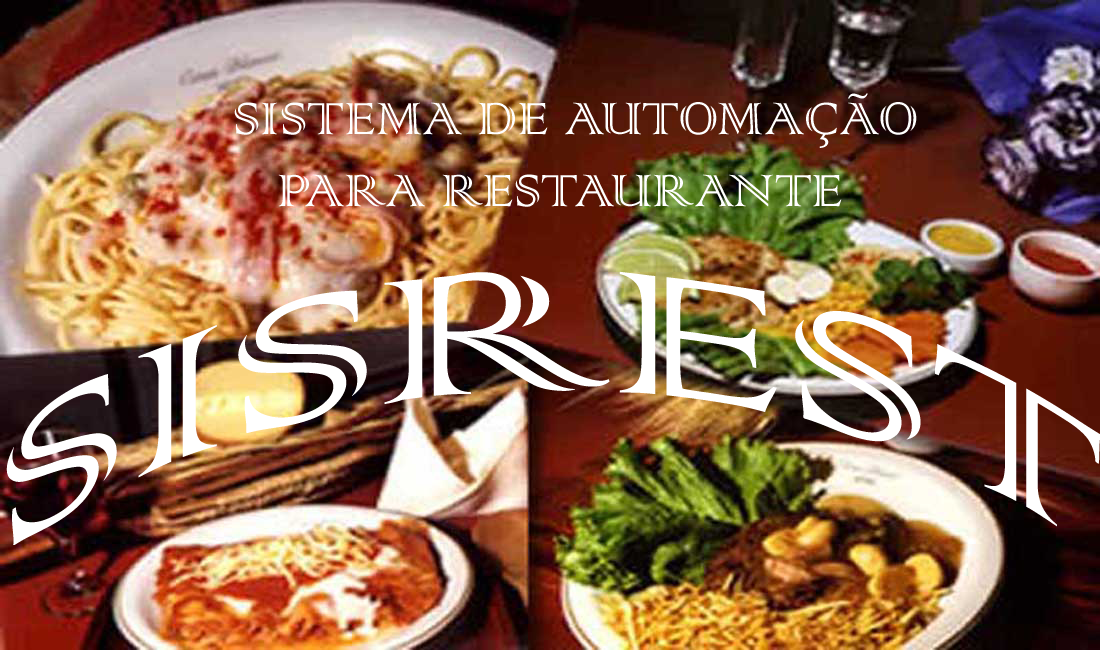
<style>
.page{position:relative;width:1100px;height:650px}
.page>*{position:absolute;margin:0}
.t1{font:60px "ColonnaMT";color:#ffffff}
.t2{font:229.6px "ColonnaMT";color:#ffffff;scale:1.37 1}
</style>
<div class="page">
<p class="t1" style="left:234px;top:93px;width:683px;height:114px">SISTEMA DE AUTOMAÇÃO <br>   PARA RESTAURANTE</p>
<p class="t2" style="left:6px;top:271px;width:1094px;height:274px">SISREST</p>
</div>
